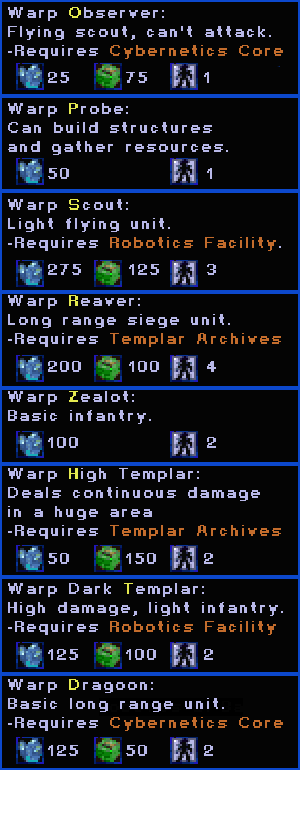
<style>
.page{position:relative;width:300px;height:817px;background:#040404}
.page>*{position:absolute;margin:0}
.t1{font:16px "Starcraft-Ingamechat";color:#b8b8e8;font-weight:bold}
.t2{font:16px "Starcraft-Ingamechat";color:#e4e94f;font-weight:bold}
.t3{font:16px "Starcraft-Ingamechat";color:#c36c2c;font-weight:bold}
</style>
<div class="page">
<p class="t1" style="left:8px;top:7px;width:275px;height:724px">Warp <span class="t2">O</span>bserver:<br>Flying scout, can't attack.<br>-Requires <span class="t3">Cybernetics Core<br><br><br></span>Warp <span class="t2">P</span>robe:<br>Can build structures<br>and gather resources.<br><br><br>Warp <span class="t2">S</span>cout:<br>Light flying unit.<br>-Requires <span class="t3">Robotics Facility</span>.<br><br><br>Warp <span class="t2">R</span>eaver:<br>Long range siege unit.<br>-Requires <span class="t3">Templar Archives<br><br><br></span>Warp <span class="t2">Z</span>ealot:<br>Basic infantry.<br><br><br>Warp <span class="t2">H</span>igh Templar:<br>Deals continuous damage<br>in a huge area<br>-Requires <span class="t3">Templar Archives<br><br><br></span>Warp Dark <span class="t2">T</span>emplar:<br>High damage, light infantry.<br>-Requires <span class="t3">Robotics Facility<br><br><br></span>Warp <span class="t2">D</span>ragoon:<br>Basic long range unit.<br>-Requires <span class="t3">Cybernetics Core</span></p>
<p class="t1" style="left:48px;top:72px;width:168px;height:684px">25      75      1     <br><br><br><br><br>50               1<br><br><br><br><br>275     125     3<br><br><br><br><br>200     100     4<br><br><br><br>100              2<br><br><br><br><br><br>50      150     2<br><br><br><br><br>125     100     2<br><br><br><br><br>125     50      2</p>
</div>
